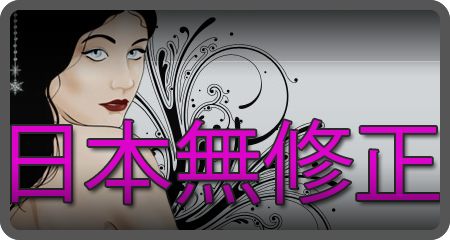
<style>
.page{position:relative;width:450px;height:240px}
.page>*{position:absolute;margin:0}
.t1{font:90px "KozGoPr6N-Regular";color:#dc04ca}
</style>
<div class="page">
<p class="t1" style="left:12px;top:119px;width:428px;height:85px">日本無修正</p>
</div>
